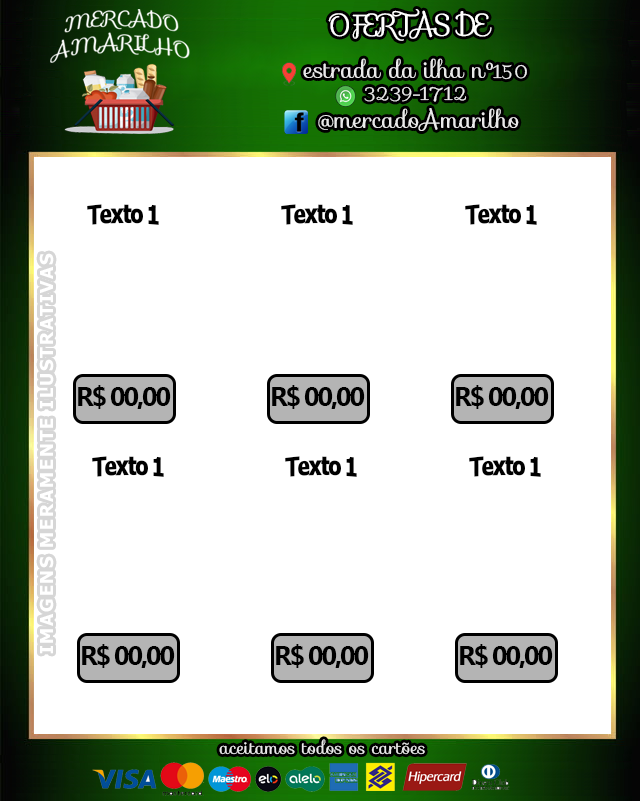
<style>
.page{position:relative;width:640px;height:801px;background:#ffffff}
.page>*{position:absolute;margin:0}
.t1{font:29px "Sofia-Regular";letter-spacing:-0.08em;color:#ffffff}
.t2{font:22px "Tahoma-Bold";letter-spacing:-0.08em;color:#000000}
.t3{font:18px "Tahoma-Bold";letter-spacing:0.1em;color:#ffffff}
.t4{font:27px "MicrosoftTaiLe-Bold";letter-spacing:-0.08em;color:#000000}
</style>
<div class="page">
<p class="t1" style="left:328px;top:9px;width:164px;height:32px">OFERTAS DE</p>
<p class="t2" style="left:87px;top:204px;width:72px;height:21px">Texto 1</p>
<p class="t2" style="left:281px;top:204px;width:72px;height:21px">Texto 1</p>
<p class="t2" style="left:465px;top:204px;width:72px;height:21px">Texto 1</p>
<p class="t3" style="left:39px;top:253px;width:15px;height:401px;rotate:-90deg;opacity:0.23">IMAGENS MERAMENTE ILUSTRATIVAS</p>
<p class="t4" style="left:78px;top:385px;width:93px;height:24px">R$ 00,00</p>
<p class="t4" style="left:272px;top:385px;width:93px;height:24px">R$ 00,00</p>
<p class="t4" style="left:456px;top:385px;width:93px;height:24px">R$ 00,00</p>
<p class="t2" style="left:92px;top:456px;width:72px;height:21px">Texto 1</p>
<p class="t2" style="left:285px;top:456px;width:72px;height:21px">Texto 1</p>
<p class="t2" style="left:469px;top:456px;width:72px;height:21px">Texto 1</p>
<p class="t4" style="left:82px;top:644px;width:93px;height:24px">R$ 00,00</p>
<p class="t4" style="left:276px;top:644px;width:93px;height:24px">R$ 00,00</p>
<p class="t4" style="left:460px;top:644px;width:93px;height:24px">R$ 00,00</p>
</div>
